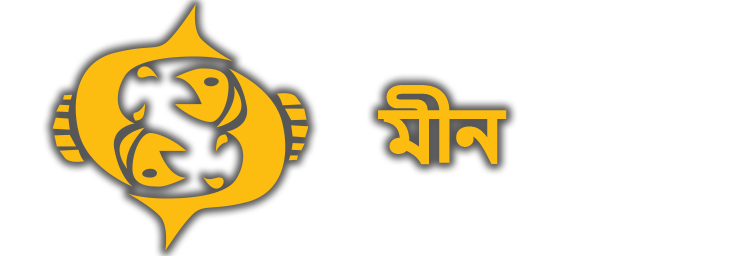
<style>
.page{position:relative;width:749px;height:256px;background:#ffffff}
.page>*{position:absolute;margin:0}
.t1{font:70.8px "NirmalaUI-Bold";letter-spacing:-0.05em;color:#fcbc10;text-transform:uppercase;font-weight:bold}
</style>
<div class="page">
<p class="t1" style="left:378px;top:85px;width:129px;height:80px">মীন</p>
</div>
